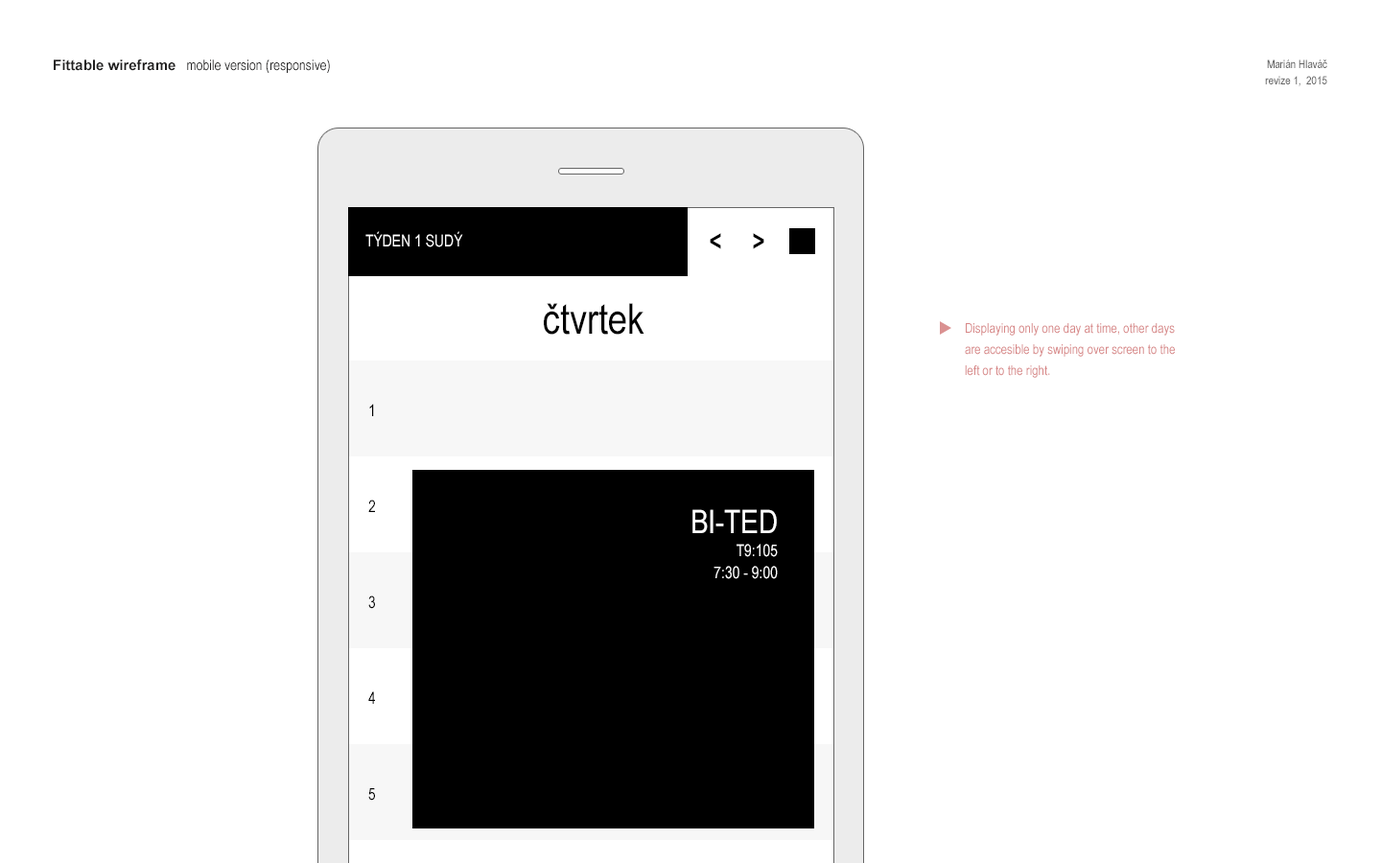
<style>
.page{position:relative;width:1381px;height:863px;background:#ffffff}
.page>*{position:absolute;margin:0}
.t1{font:14.4px "ArialNarrow";color:#201f1f}
.t2{font:14.4px "Arial-BoldMT";color:#201f1f}
.t3{font:11.5px "ArialNarrow";color:#656565}
.t4{font:16.3px "ArialNarrow";color:#ffffff}
.t5{font:28.8px "Arial-BoldMT";color:#000000;scale:0.76 1}
.t6{font:42.2px "ArialNarrow";color:#000000}
.t7{font:13.4px/21.1px "ArialNarrow";color:#d78787}
.t8{font:16.3px/93px "ArialNarrow";color:#000000}
.t9{font:32.6px "ArialNarrow";color:#ffffff}
</style>
<div class="page">
<p class="t1" style="left:54px;top:59px;width:276px;height:14px"><span class="t2">Fittable wireframe </span>  mobile version (responsive)</p>
<p class="t3" style="left:1265px;top:59px;width:63px;height:27px;text-align:right">Marián Hlaváč <br>revize 1,  2015</p>
<p class="t4" style="left:365px;top:231px;width:98px;height:16px">TÝDEN 1 SUDÝ</p>
<p class="t5" style="left:710px;top:233px;width:54px;height:16px">&lt;     &gt;</p>
<p class="t6" style="left:544px;top:303px;width:101px;height:32px">čtvrtek</p>
<p class="t7" style="left:965px;top:323px;width:210px;height:55px">Displaying only one day at time, other days are accesible by swiping over screen to the left or to the right.</p>
<p class="t8" style="left:368px;top:404px;width:7px;height:397px">1<br>2<br>3<br>4<br>5<br>6</p>
<p class="t4" style="left:693px;top:509px;width:85px;height:70px;text-align:right"><span class="t9">BI-TED<br></span>T9:105<br>7:30 - 9:00</p>
</div>
